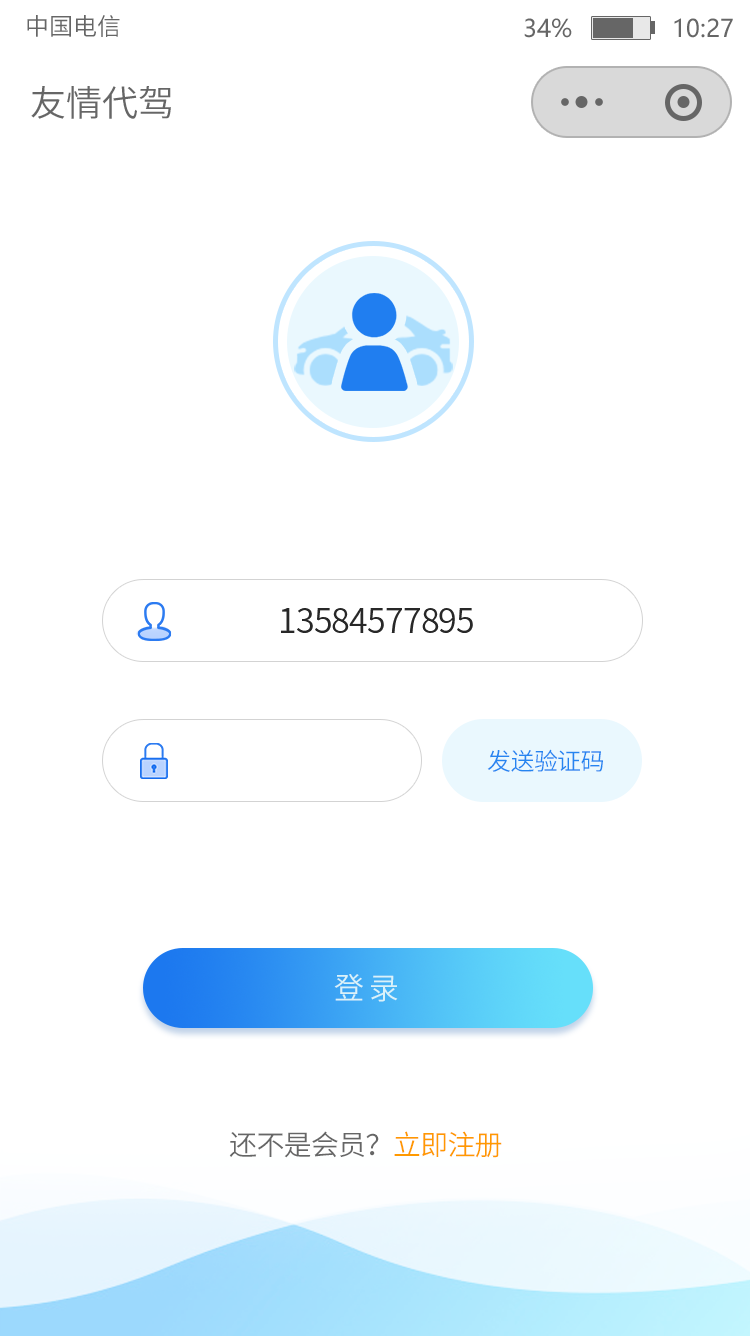
<style>
.page{position:relative;width:750px;height:1336px;background:#ffffff}
.page>*{position:absolute;margin:0}
.t1{font:24px "SourceHanSansCN-Normal";color:#666666}
.t2{font:24px "MicrosoftYaHei";color:#666666}
.t3{font:36px "SourceHanSansCN-Normal";color:#666666}
.t4{font:34px "SourceHanSansCN-Normal";letter-spacing:-0.025em;color:#282828}
.t5{font:24px "SourceHanSansCN-Normal";letter-spacing:-0.025em;color:#2585f0}
.t6{font:30px "SourceHanSansCN-Normal";letter-spacing:-0.025em;color:#daf2f9}
.t7{font:28px "SourceHanSansCN-Normal";letter-spacing:-0.025em;color:#666666}
.t8{font:28px "SourceHanSansCN-Normal";letter-spacing:-0.025em;color:#ff9900}
</style>
<div class="page">
<p class="t1" style="left:27px;top:15px;width:93px;height:22px">中国电信</p>
<p class="t2" style="left:524px;top:18px;width:209px;height:20px">34%              10:27</p>
<p class="t3" style="left:31px;top:86px;width:140px;height:33px">友情代驾</p>
<p class="t4" style="left:281px;top:608px;width:192px;height:25px">13584577895</p>
<p class="t5" style="left:487px;top:749px;width:116px;height:23px">发送验证码</p>
<p class="t6" style="left:334px;top:974px;width:64px;height:28px">登 录</p>
<p class="t7" style="left:229px;top:1131px;width:273px;height:27px">还不是会员？<span class="t8">立即注册</span></p>
</div>
